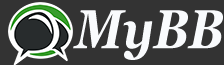
<style>
.page{position:relative;width:224px;height:65px;background:#333333}
.page>*{position:absolute;margin:0}
.t1{font:54.7px "Georgia-BoldItalic";color:#f9fbfd;scale:0.84 1}
</style>
<div class="page">
<p class="t1" style="left:73px;top:10px;width:150px;height:50px">MyBB</p>
</div>
